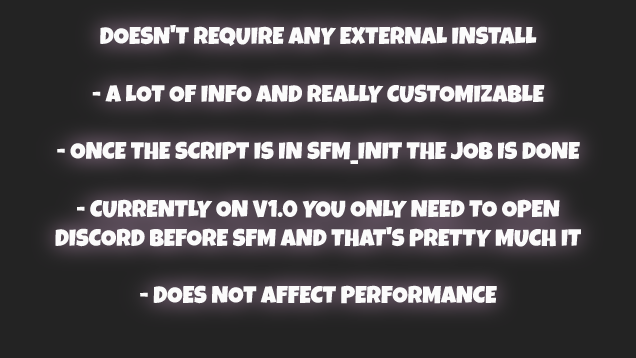
<style>
.page{position:relative;width:636px;height:358px;background:#232323}
.page>*{position:absolute;margin:0}
.t1{font:24px "LuckiestGuy-Regular";color:#fbfbfb}
</style>
<div class="page">
<p class="t1" style="left:55px;top:25px;width:526px;height:279px;text-align:center">DOESN'T REQUIRE ANY EXTERNAL INSTALL<br><br>- A LOT OF INFO AND REALLY CUSTOMIZABLE<br><br>- ONCE THE SCRIPT IS IN SFM_INIT THE JOB IS DONE<br><br>- CURRENTLY ON V1.0 YOU ONLY NEED TO OPEN<br>DISCORD BEFORE SFM AND THAT'S PRETTY MUCH IT<br><br>- DOES NOT AFFECT PERFORMANCE</p>
</div>
